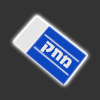
<style>
.page{position:relative;width:100px;height:100px;background:#333333}
.page>*{position:absolute;margin:0}
.t1{font:19.9px "FbAlbatros-Black";color:#e6e6e6}
</style>
<div class="page">
<p class="t1" style="left:40px;top:40px;width:32px;height:29px;rotate:38deg">מחק</p>
</div>
